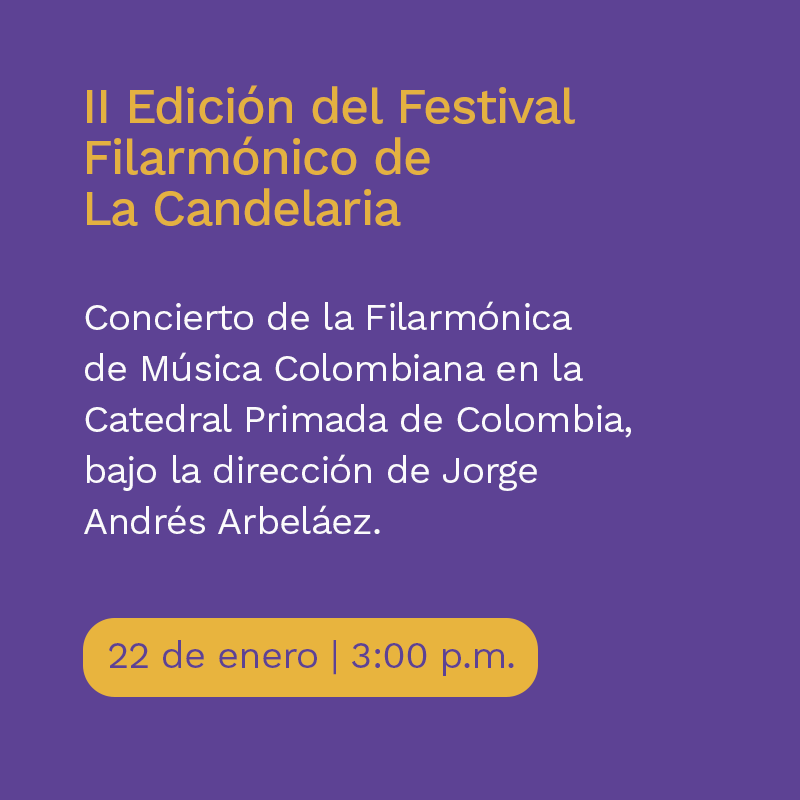
<style>
.page{position:relative;width:800px;height:800px;background:#5d4294}
.page>*{position:absolute;margin:0}
.t1{font:50px/51px "WorkSans-Medium";letter-spacing:-0.025em;color:#e8b43e}
.t2{font:38px/51px "WorkSans-Regular";letter-spacing:-0.025em;color:#ffffff}
.t3{font:38px "WorkSans-Regular";letter-spacing:-0.025em;color:#5d4294}
</style>
<div class="page">
<p class="t1" style="left:87px;top:85px;width:489px;height:141px;opacity:0.97">II Edición del Festival <br>Filarmónico de <br>La Candelaria</p>
<p class="t2" style="left:84px;top:301px;width:547px;height:233px;opacity:0.97">Concierto de la Filarmónica <br>de Música Colombiana en la <br>Catedral Primada de Colombia, <br>bajo la dirección de Jorge <br>Andrés Arbeláez.</p>
<p class="t3" style="left:109px;top:640px;width:405px;height:36px">22 de enero | 3:00 p.m.</p>
</div>
